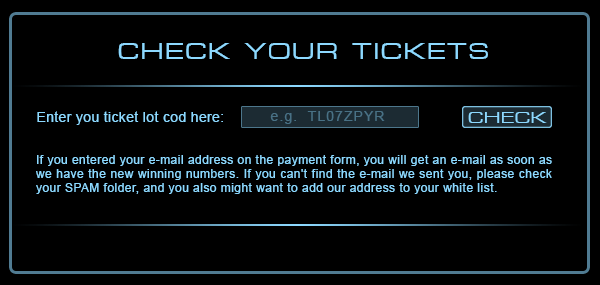
<style>
.page{position:relative;width:600px;height:285px;background:#000000}
.page>*{position:absolute;margin:0}
.t1{font:24px "MicrogrammaD-MediExte";letter-spacing:0.1em;color:#8dd9ff}
.t2{font:14px "ArialMT";letter-spacing:0.025em;color:#8dd9ff}
.t3{font:14px "ArialMT";letter-spacing:0.075em;color:#497185}
.t4{font:17.1px "MicrogrammaD-MediExte";letter-spacing:0.075em;color:#8dd9ff}
.t5{font:12px "ArialMT";letter-spacing:0.05em;color:#8dd9ff}
</style>
<div class="page">
<p class="t1" style="left:118px;top:43px;width:370px;height:16px">CHECK  YOUR  TICKETS</p>
<p class="t2" style="left:37px;top:111px;width:186px;height:14px">Enter you ticket lot cod here:</p>
<p class="t3" style="left:270px;top:111px;width:115px;height:13px">e.g.  TL07ZPYR</p>
<p class="t4" style="left:468px;top:112px;width:79px;height:11px">CHECK</p>
<p class="t5" style="left:36px;top:155px;width:516px;height:39px;text-align:justify">If you entered your e-mail address on the payment form, you will get an e-mail as soon as we have the new winning numbers. If you can't find the e-mail we sent you, please check your SPAM folder, and you also might want to add our address to your white list.</p>
</div>
